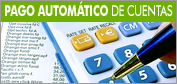
<style>
.page{position:relative;width:177px;height:84px}
.page>*{position:absolute;margin:0}
.t1{font:15px "FuturaBT-Bold";letter-spacing:-0.025em;color:#ffffff;scale:0.7 1}
.t2{font:15px "FuturaBT-Medium";letter-spacing:-0.025em;color:#ffffff;scale:0.7 1}
</style>
<div class="page">
<p class="t1" style="left:5px;top:1px;width:168px;height:15px">PAGO AUTOMÁTICO <span class="t2">DE CUENTAS</span></p>
</div>
